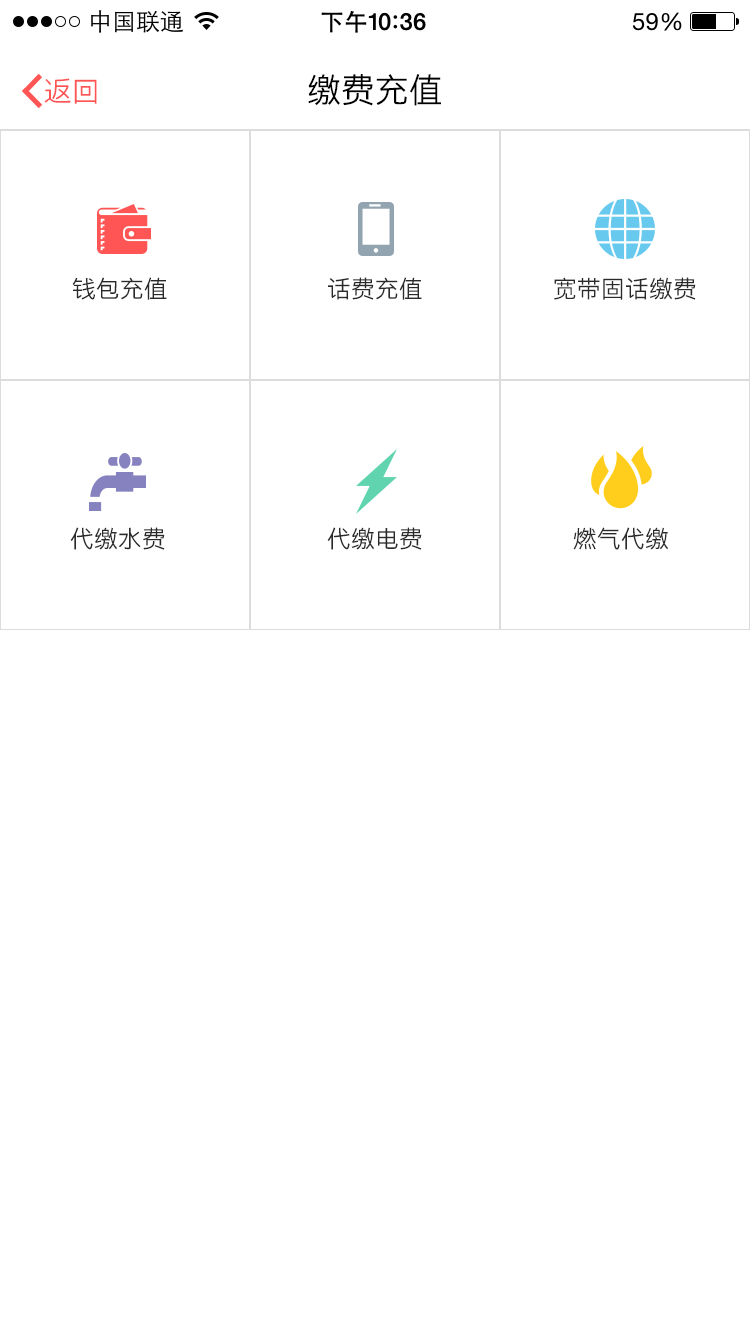
<style>
.page{position:relative;width:750px;height:1334px;background:#ffffff}
.page>*{position:absolute;margin:0}
.t1{font:28px "STHeitiSC-Light";color:#ff5555}
.t2{font:34px "STHeitiSC-Light";color:#000000}
.t3{font:24px "STHeitiSC-Light";color:#2a2a2a}
</style>
<div class="page">
<p class="t1" style="left:44px;top:78px;width:53px;height:26px">返回</p>
<p class="t2" style="left:308px;top:74px;width:133px;height:32px">缴费充值</p>
<p class="t3" style="left:72px;top:277px;width:95px;height:23px">钱包充值</p>
<p class="t3" style="left:328px;top:277px;width:94px;height:23px">话费充值</p>
<p class="t3" style="left:554px;top:277px;width:142px;height:23px">宽带固话缴费</p>
<p class="t3" style="left:70px;top:527px;width:95px;height:23px">代缴水费</p>
<p class="t3" style="left:327px;top:527px;width:95px;height:23px">代缴电费</p>
<p class="t3" style="left:573px;top:527px;width:95px;height:23px">燃气代缴</p>
</div>
